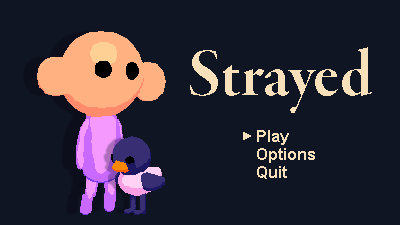
<style>
.page{position:relative;width:400px;height:225px;background:#101524}
.page>*{position:absolute;margin:0}
.t1{font:70px "GaramondPremrPro-BdDisp";color:#f8e0ba}
.t2{font:16px "Arial-BoldMT";color:#f8e0ba}
</style>
<div class="page">
<p class="t1" style="left:190px;top:47px;width:182px;height:66px">Strayed</p>
<p class="t2" style="left:257px;top:130px;width:32px;height:15px">Play</p>
<p class="t2" style="left:257px;top:148px;width:58px;height:15px">Options</p>
<p class="t2" style="left:257px;top:166px;width:30px;height:13px">Quit</p>
</div>
